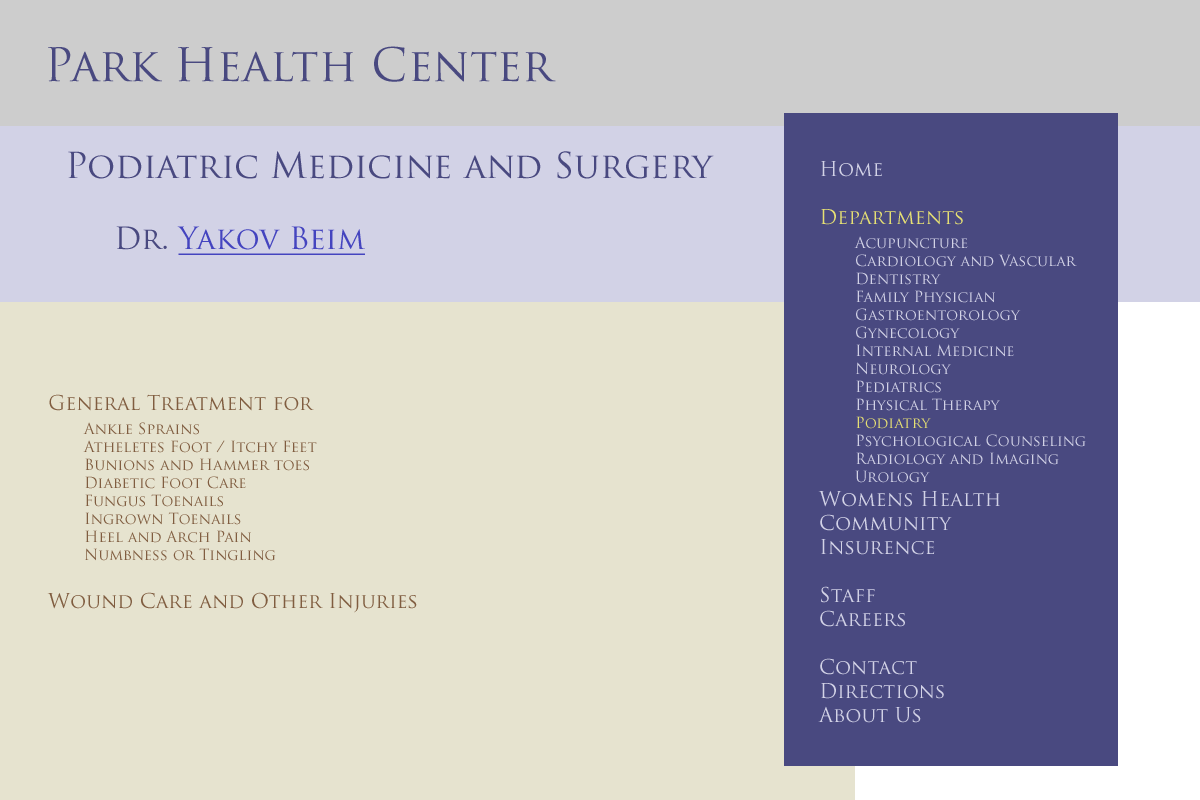
<style>
.page{position:relative;width:1200px;height:800px;background:#e6e3cf}
.page>*{position:absolute;margin:0}
.t1{font:45px "TrajanPro-Regular";color:#494980}
.t2{font:35px "TrajanPro-Regular";color:#494980}
.t3{font:15px "TrajanPro-Regular";color:#d2d2e6}
.t4{font:20px "TrajanPro-Regular";color:#d2d2e6}
.t5{font:20px "TrajanPro-Regular";color:#e6e073}
.t6{font:15px "TrajanPro-Regular";color:#e6e073}
.t7{font:30px "TrajanPro-Regular";color:#4444bf;text-decoration:underline}
.t8{font:30px "TrajanPro-Regular";color:#494980}
.t9{font:15px "TrajanPro-Regular";color:#805d40}
.t10{font:20px "TrajanPro-Regular";color:#805d40}
</style>
<div class="page">
<p class="t1" style="left:48px;top:46px;width:508px;height:36px">Park Health Center</p>
<p class="t2" style="left:68px;top:151px;width:646px;height:28px">Podiatric Medicine and Surgery</p>
<p class="t3" style="left:818px;top:161px;width:268px;height:562px"><span class="t4">Home<br><br></span><span class="t5">Departments<br> </span>Acupuncture<br> Cardiology and Vascular<br> Dentistry<br> Family Physician<br> Gastroentorology<br> Gynecology<br> Internal Medicine<br> Neurology<br> Pediatrics<br> Physical Therapy<br> <span class="t6">Podiatry<br></span> Psychological Counseling<br> Radiology and Imaging<br> Urology<br><span class="t4">Womens Health<br>Community<br>Insurence<br><br>Staff<br>Careers<br><br>Contact<br>Directions<br>About Us</span></p>
<p class="t7" style="left:116px;top:226px;width:249px;height:29px"><span class="t8">Dr. </span>Yakov Beim</p>
<p class="t9" style="left:47px;top:394px;width:370px;height:219px"><span class="t10">General Treatment for<br>  </span>Ankle Sprains<br> Atheletes Foot / Itchy Feet<br> Bunions and Hammer toes<br> Diabetic Foot Care<br> Fungus Toenails<br> Ingrown Toenails<br> Heel and Arch Pain<br> Numbness or Tingling<br><span class="t10"><br>Wound Care and Other Injuries</span></p>
</div>
